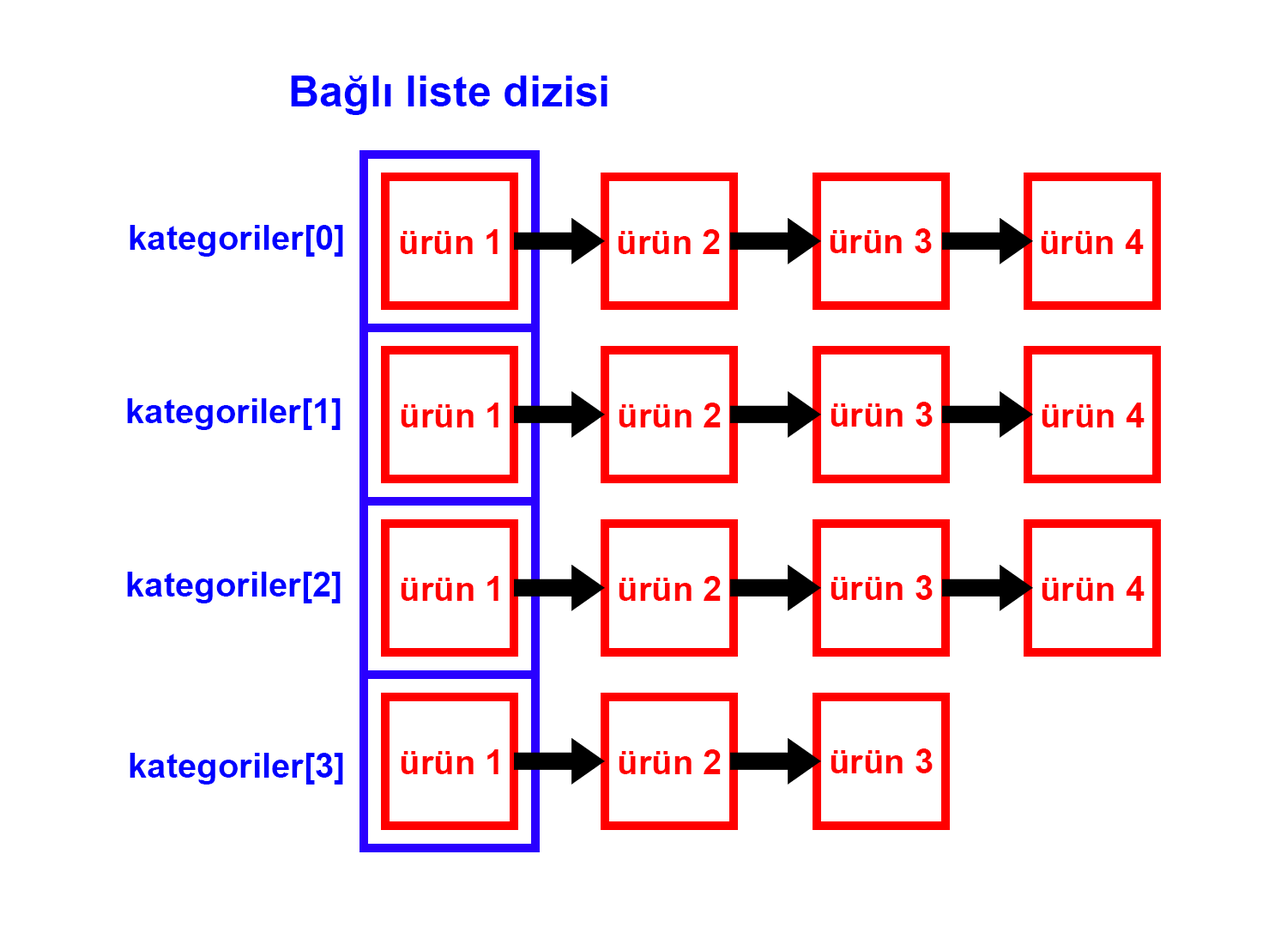
<style>
.page{position:relative;width:1287px;height:927px;background:#ffffff}
.page>*{position:absolute;margin:0}
.t1{font:42.9px "Arial-BoldMT";color:#0000ff}
.t2{font:34.3px "Arial-BoldMT";color:#0000ff}
.t3{font:34.3px "Arial-BoldMT";color:#ff0000}
</style>
<div class="page">
<p class="t1" style="left:291px;top:75px;width:316px;height:40px">Bağlı liste dizisi</p>
<p class="t2" style="left:130px;top:225px;width:213px;height:32px">kategoriler[0]</p>
<p class="t3" style="left:400px;top:229px;width:98px;height:25px">ürün 1</p>
<p class="t3" style="left:618px;top:229px;width:102px;height:25px">ürün 2</p>
<p class="t3" style="left:830px;top:228px;width:102px;height:25px">ürün 3</p>
<p class="t3" style="left:1041px;top:229px;width:103px;height:25px">ürün 4</p>
<p class="t2" style="left:127px;top:398px;width:214px;height:32px">kategoriler[1]</p>
<p class="t3" style="left:830px;top:402px;width:103px;height:24px">ürün 3</p>
<p class="t3" style="left:401px;top:402px;width:97px;height:25px">ürün 1</p>
<p class="t3" style="left:619px;top:402px;width:102px;height:25px">ürün 2</p>
<p class="t3" style="left:1042px;top:402px;width:102px;height:25px">ürün 4</p>
<p class="t2" style="left:127px;top:571px;width:214px;height:32px">kategoriler[2]</p>
<p class="t3" style="left:401px;top:576px;width:97px;height:25px">ürün 1</p>
<p class="t3" style="left:619px;top:576px;width:102px;height:25px">ürün 2</p>
<p class="t3" style="left:830px;top:575px;width:103px;height:25px">ürün 3</p>
<p class="t3" style="left:1042px;top:576px;width:102px;height:25px">ürün 4</p>
<p class="t3" style="left:401px;top:749px;width:97px;height:25px">ürün 1</p>
<p class="t3" style="left:619px;top:749px;width:102px;height:25px">ürün 2</p>
<p class="t3" style="left:830px;top:748px;width:103px;height:25px">ürün 3</p>
<p class="t2" style="left:130px;top:752px;width:213px;height:32px">kategoriler[3]</p>
</div>
